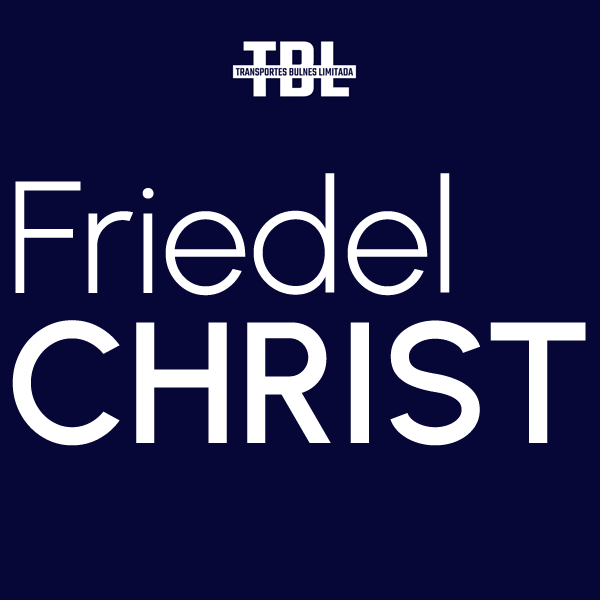
<style>
.page{position:relative;width:600px;height:600px;background:#060737}
.page>*{position:absolute;margin:0}
.t1{font:159px "Urbanist-Light";color:#ffffff}
.t2{font:172px "Urbanist-SemiBold";color:#ffffff}
</style>
<div class="page">
<p class="t1" style="left:15px;top:173px;width:435px;height:123px">Friedel</p>
<p class="t2" style="left:12px;top:320px;width:574px;height:126px">CHRIST</p>
</div>
